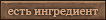
<style>
.page{position:relative;width:106px;height:20px}
.page>*{position:absolute;margin:0}
.t1{font:10.5px "CooperMediumCBT";letter-spacing:0.03em;color:#d2a37e}
</style>
<div class="page">
<p class="t1" style="left:8px;top:9px;width:91px;height:8px">есть ингредиент</p>
</div>
